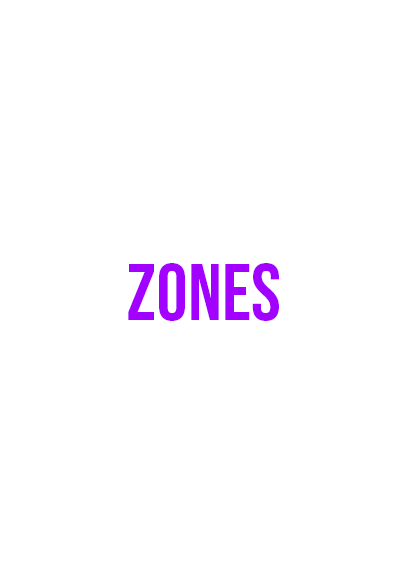
<style>
.page{position:relative;width:408px;height:585px;background:#ffffff}
.page>*{position:absolute;margin:0}
.t1{font:80px "BebasNeue-Regular";color:#a200ff}
</style>
<div class="page">
<p class="t1" style="left:128px;top:263px;width:151px;height:58px">zones</p>
</div>
